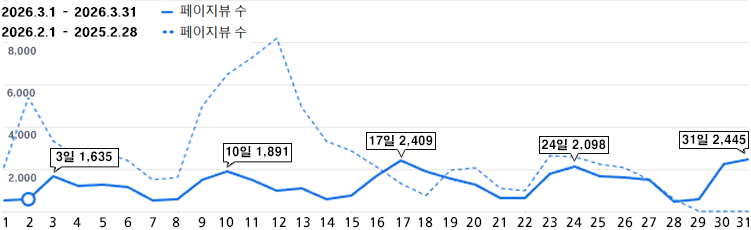
<style>
.page{position:relative;width:751px;height:230px;background:#ffffff}
.page>*{position:absolute;margin:0}
.t1{font:11.3px/20px "HeadlineR-HM";color:#000000}
.t2{font:9px "HeadlineR-HM";color:#686c7e}
.t3{font:12px "H2gtrE";letter-spacing:-0.01em;color:#000000}
.t4{font:13px "NanumGothicBold";color:#000000}
</style>
<div class="page">
<p class="t1" style="left:1px;top:7px;width:136px;height:30px">2026.3.1 - 2026.3.31<br>2026.2.1 - 2025.2.28</p>
<p class="t2" style="left:8px;top:46px;width:28px;height:10px">8,000</p>
<p class="t2" style="left:7px;top:88px;width:28px;height:10px">6,000</p>
<p class="t2" style="left:8px;top:130px;width:29px;height:10px">4,000</p>
<p class="t3" style="left:369px;top:135px;width:64px;height:12px">17일 2,409</p>
<p class="t3" style="left:682px;top:134px;width:64px;height:12px">31일 2,445</p>
<p class="t3" style="left:226px;top:146px;width:61px;height:12px">10일 1,891</p>
<p class="t3" style="left:542px;top:139px;width:64px;height:12px">24일 2,098</p>
<p class="t3" style="left:56px;top:151px;width:56px;height:12px">3일 1,635</p>
<p class="t2" style="left:8px;top:173px;width:29px;height:10px">2,000</p>
<p class="t4" style="left:3px;top:217px;width:4px;height:10px">1</p>
<p class="t4" style="left:26px;top:217px;width:7px;height:10px">2</p>
<p class="t4" style="left:49px;top:217px;width:7px;height:11px">3</p>
<p class="t4" style="left:73px;top:217px;width:8px;height:10px">4</p>
<p class="t4" style="left:100px;top:217px;width:6px;height:11px">5</p>
<p class="t4" style="left:124px;top:217px;width:8px;height:11px">6</p>
<p class="t4" style="left:150px;top:217px;width:6px;height:10px">7</p>
<p class="t4" style="left:172px;top:217px;width:8px;height:11px">8</p>
<p class="t4" style="left:198px;top:217px;width:8px;height:11px">9</p>
<p class="t4" style="left:219px;top:217px;width:15px;height:10px">10</p>
<p class="t4" style="left:245px;top:217px;width:12px;height:10px">11</p>
<p class="t4" style="left:272px;top:217px;width:14px;height:10px">12</p>
<p class="t4" style="left:296px;top:217px;width:14px;height:11px">13</p>
<p class="t4" style="left:320px;top:217px;width:15px;height:10px">14</p>
<p class="t4" style="left:345px;top:217px;width:14px;height:11px">15</p>
<p class="t4" style="left:370px;top:217px;width:15px;height:11px">16</p>
<p class="t4" style="left:396px;top:217px;width:14px;height:10px">17</p>
<p class="t4" style="left:418px;top:217px;width:15px;height:11px">18</p>
<p class="t4" style="left:443px;top:217px;width:15px;height:11px">19</p>
<p class="t4" style="left:466px;top:217px;width:16px;height:10px">20</p>
<p class="t4" style="left:492px;top:217px;width:13px;height:10px">21</p>
<p class="t4" style="left:517px;top:217px;width:15px;height:10px">22</p>
<p class="t4" style="left:542px;top:217px;width:15px;height:11px">23</p>
<p class="t4" style="left:566px;top:217px;width:16px;height:10px">24</p>
<p class="t4" style="left:590px;top:217px;width:15px;height:11px">25</p>
<p class="t4" style="left:617px;top:217px;width:16px;height:11px">26</p>
<p class="t4" style="left:641px;top:217px;width:15px;height:10px">27</p>
<p class="t4" style="left:666px;top:217px;width:16px;height:11px">28</p>
<p class="t4" style="left:690px;top:217px;width:16px;height:11px">29</p>
<p class="t4" style="left:714px;top:217px;width:16px;height:11px">30</p>
<p class="t4" style="left:736px;top:217px;width:13px;height:11px">31</p>
</div>
